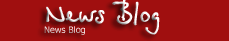
<style>
.page{position:relative;width:229px;height:41px;background:#a00f0f}
.page>*{position:absolute;margin:0}
.t1{font:30px "BetinaScriptBold"}
.t2{font:9px "Tahoma"}
</style>
<div class="page">
<p class="t1" style="left:44px;top:0px;width:116px;height:35px">News Blog<br><span class="t2">News Blog</span></p>
</div>
